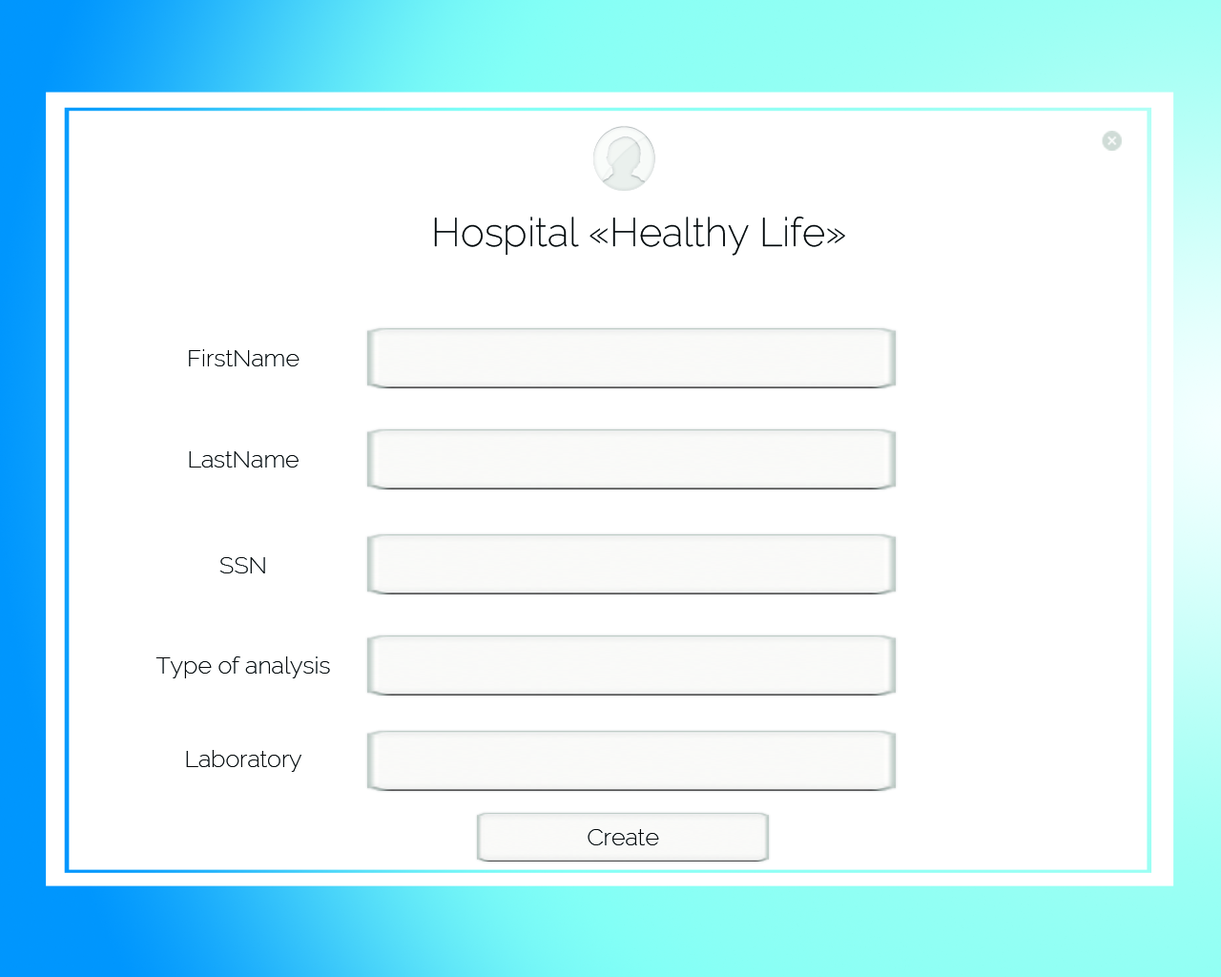
<style>
.page{position:relative;width:1221px;height:977px;background:#ffffff}
.page>*{position:absolute;margin:0}
.t1{font:39.7px "Raleway-ExtraLight";color:#050708}
.t2{font:23.8px "Raleway-ExtraLight";color:#050708}
</style>
<div class="page">
<p class="t1" style="left:434px;top:216px;width:411px;height:40px">Hospital «Healthy Life»</p>
<p class="t2" style="left:189px;top:349px;width:110px;height:17px">FirstName</p>
<p class="t2" style="left:189px;top:451px;width:110px;height:16px">LastName</p>
<p class="t2" style="left:219px;top:557px;width:46px;height:16px">SSN</p>
<p class="t2" style="left:155px;top:656px;width:175px;height:22px">Type of analysis</p>
<p class="t2" style="left:186px;top:750px;width:115px;height:22px">Laboratory</p>
<p class="t2" style="left:588px;top:829px;width:71px;height:16px">Create</p>
</div>
